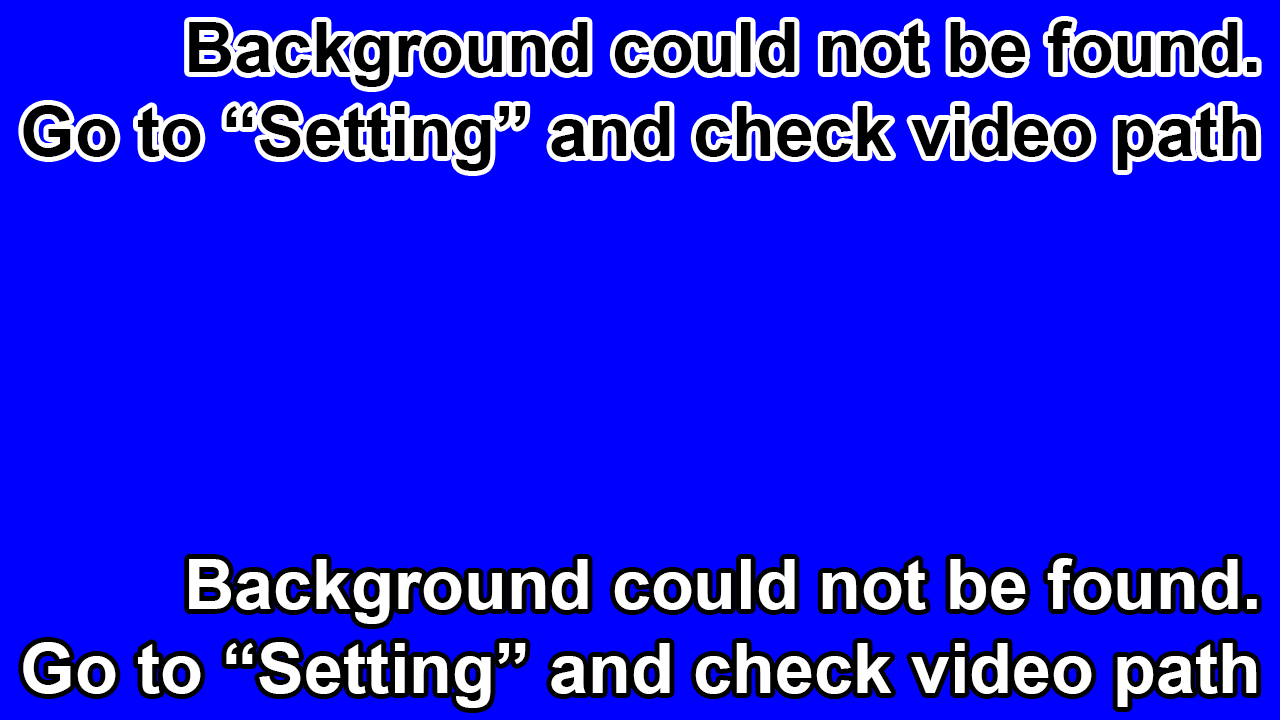
<style>
.page{position:relative;width:1280px;height:720px;background:#0000ff}
.page>*{position:absolute;margin:0}
.t1{font:70px "Arial-BoldMT";color:#000000}
.t2{font:70px "Arial-BoldMT";color:#ffffff}
</style>
<div class="page">
<p class="t1" style="left:23px;top:21px;width:1234px;height:150px;text-align:right">Background could not be found.<br>Go to “Setting” and check video path</p>
<p class="t2" style="left:23px;top:558px;width:1234px;height:150px;text-align:right">Background could not be found.<br>Go to “Setting” and check video path</p>
</div>
